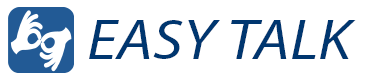
<style>
.page{position:relative;width:384px;height:80px;background:#ffffff}
.page>*{position:absolute;margin:0}
.t1{font:56.5px "MyriadPro-It";color:#00366f;text-transform:uppercase;scale:1.12 1}
</style>
<div class="page">
<p class="t1" style="left:89px;top:20px;width:267px;height:39px">EASY TALK</p>
</div>
